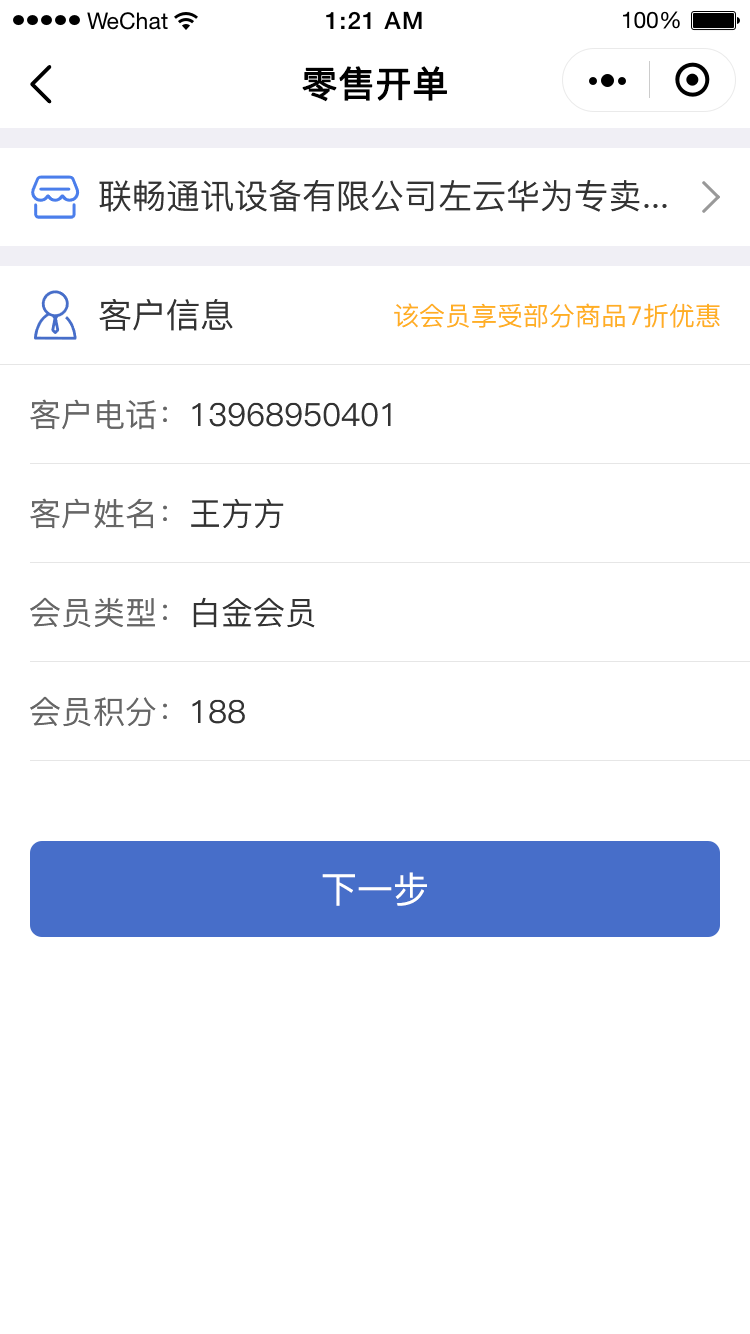
<style>
.page{position:relative;width:750px;height:1334px;background:#ffffff}
.page>*{position:absolute;margin:0}
.t1{font:36px "PingFang-SC-Medium";color:#000000;font-weight:bold}
.t2{font:34px "PingFang-SC-Medium";color:#333333}
.t3{font:26px "PingFang-SC-Medium";color:#ffaf23}
.t4{font:32px "PingFang-SC-Medium";color:#333333}
.t5{font:32px "PingFang-SC-Medium";color:#666666}
.t6{font:36px "PingFang-SC-Medium";color:#ffffff}
</style>
<div class="page">
<p class="t1" style="left:302px;top:66px;width:145px;height:36px">零售开单</p>
<p class="t2" style="left:99px;top:179px;width:568px;height:33px">联畅通讯设备有限公司左云华为专卖...</p>
<p class="t2" style="left:99px;top:299px;width:134px;height:32px">客户信息</p>
<p class="t3" style="left:394px;top:303px;width:326px;height:25px">该会员享受部分商品7折优惠</p>
<p class="t4" style="left:30px;top:399px;width:361px;height:31px"><span class="t5">客户电话：</span>13968950401</p>
<p class="t5" style="left:30px;top:498px;width:254px;height:31px">客户姓名：<span class="t4">王方方</span></p>
<p class="t5" style="left:30px;top:597px;width:285px;height:31px">会员类型：<span class="t4">白金会员</span></p>
<p class="t5" style="left:30px;top:696px;width:215px;height:31px">会员积分：<span class="t4">188</span></p>
<p class="t6" style="left:322px;top:872px;width:105px;height:34px">下一步</p>
</div>
